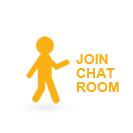
<style>
.page{position:relative;width:133px;height:133px;background:#ffffff}
.page>*{position:absolute;margin:0}
.t1{font:14px/14px "Arial-BoldMT";color:#f8b015;text-transform:uppercase}
</style>
<div class="page">
<p class="t1" style="left:76px;top:54px;width:43px;height:38px">join<br>chat<br>room</p>
</div>
